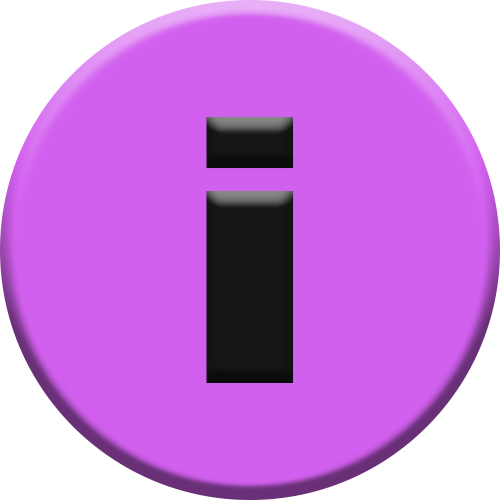
<style>
.page{position:relative;width:500px;height:500px;background:#d260ef}
.page>*{position:absolute;margin:0}
.t1{font:371.2px "Arial-Black";letter-spacing:-0.05em;color:#141716;scale:1.17 1}
</style>
<div class="page">
<p class="t1" style="left:206px;top:117px;width:88px;height:266px">i</p>
</div>
